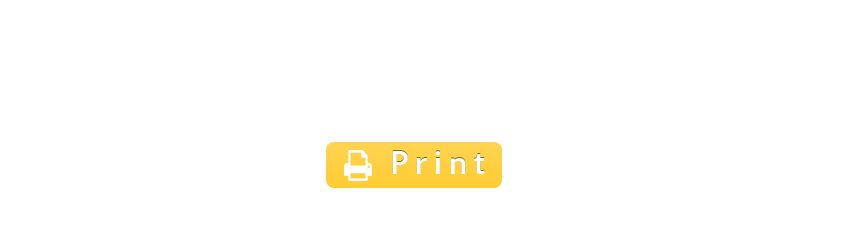
<style>
.page{position:relative;width:850px;height:250px;background:#ffffff}
.page>*{position:absolute;margin:0}
.t1{font:30px "EuphemiaUCAS-Bold";letter-spacing:0.2em;color:#fdfffc}
</style>
<div class="page">
<p class="t1" style="left:392px;top:151px;width:93px;height:23px">Print</p>
</div>
